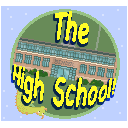
<style>
.page{position:relative;width:128px;height:128px;background:#bfd1ff}
.page>*{position:absolute;margin:0}
.t1{font:20px/31px "Chalkboard";letter-spacing:0.02em;color:#fffc28;scale:0.89 1}
.t2{font:20px "Chalkboard";letter-spacing:0.02em;color:#fffc28;scale:0.89 1}
</style>
<div class="page">
<p class="t1" style="left:13px;top:11px;width:103px;height:96px;text-align:center;rotate:8deg"><span class="t2">The<br></span>High School!</p>
</div>
